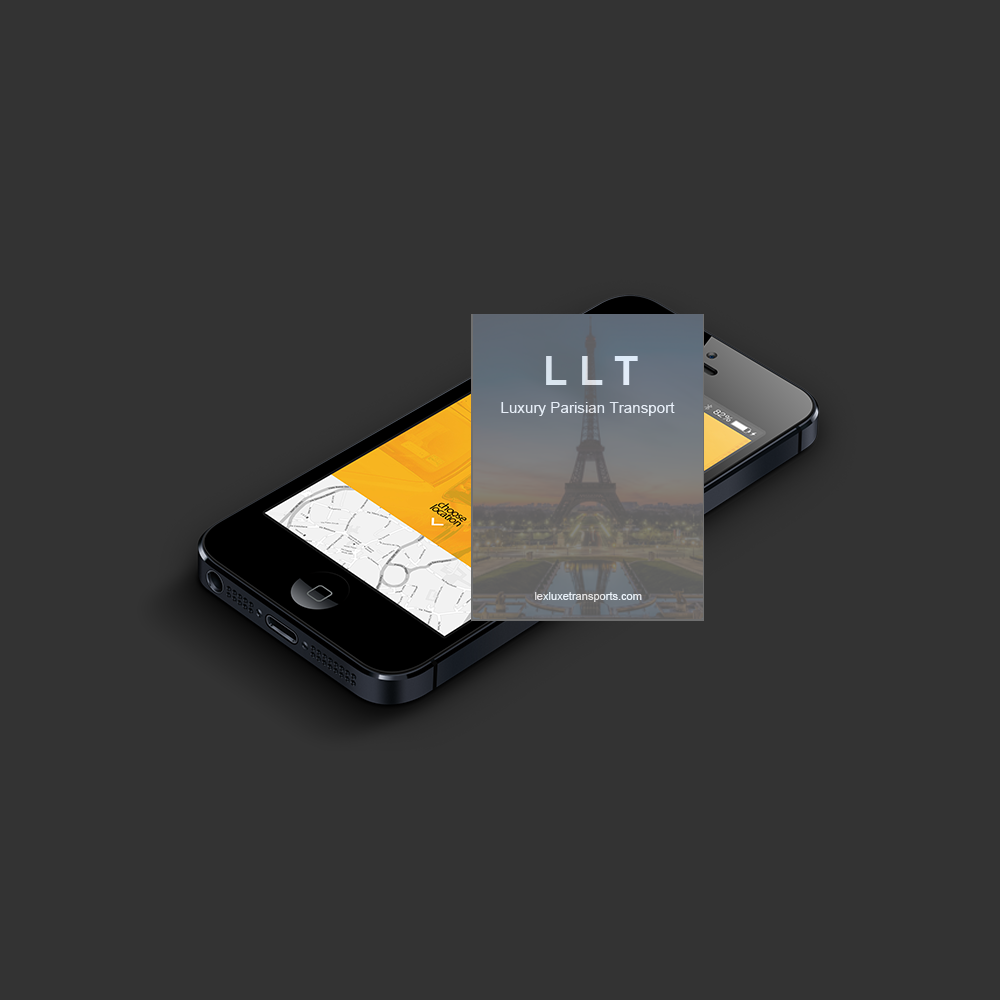
<style>
.page{position:relative;width:1000px;height:1000px;background:#333333}
.page>*{position:absolute;margin:0}
.t1{font:40px "Arial-BoldMT";color:#dbe5ef}
.t2{font:15.2px "ArialMT";color:#e6eef7}
.t3{font:11.1px "ArialMT"}
</style>
<div class="page">
<p class="t1" style="left:546px;top:356px;width:92px;height:29px">L L T</p>
<p class="t2" style="left:501px;top:402px;width:174px;height:14px">Luxury Parisian Transport</p>
<p class="t3" style="left:535px;top:592px;width:107px;height:10px">lexluxetransports.com</p>
</div>
